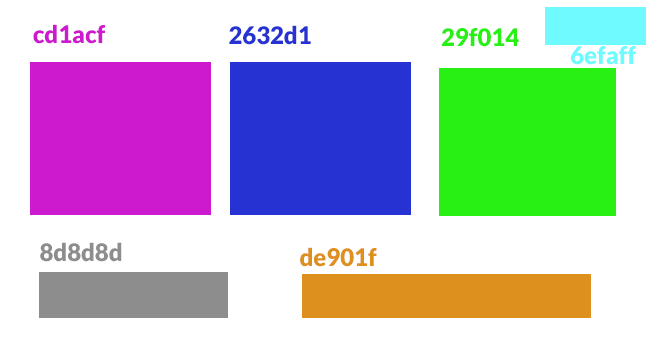
<style>
.page{position:relative;width:650px;height:350px;background:#ffffff}
.page>*{position:absolute;margin:0}
.t1{font:23.9px "Lato-Black";color:#cd1acf}
.t2{font:23.9px "Lato-Black";color:#2632d1}
.t3{font:23.9px "Lato-Black";color:#29f014}
.t4{font:23.9px "Lato-Black";color:#6efaff}
.t5{font:23.9px "Lato-Black";color:#8d8d8d}
.t6{font:23.9px "Lato-Black";color:#de901f}
</style>
<div class="page">
<p class="t1" style="left:33px;top:24px;width:73px;height:20px">cd1acf</p>
<p class="t2" style="left:229px;top:25px;width:82px;height:20px">2632d1</p>
<p class="t3" style="left:441px;top:28px;width:78px;height:19px">29f014</p>
<p class="t4" style="left:571px;top:46px;width:65px;height:19px">6efaff</p>
<p class="t5" style="left:40px;top:242px;width:82px;height:20px">8d8d8d</p>
<p class="t6" style="left:300px;top:247px;width:77px;height:20px">de901f</p>
</div>
